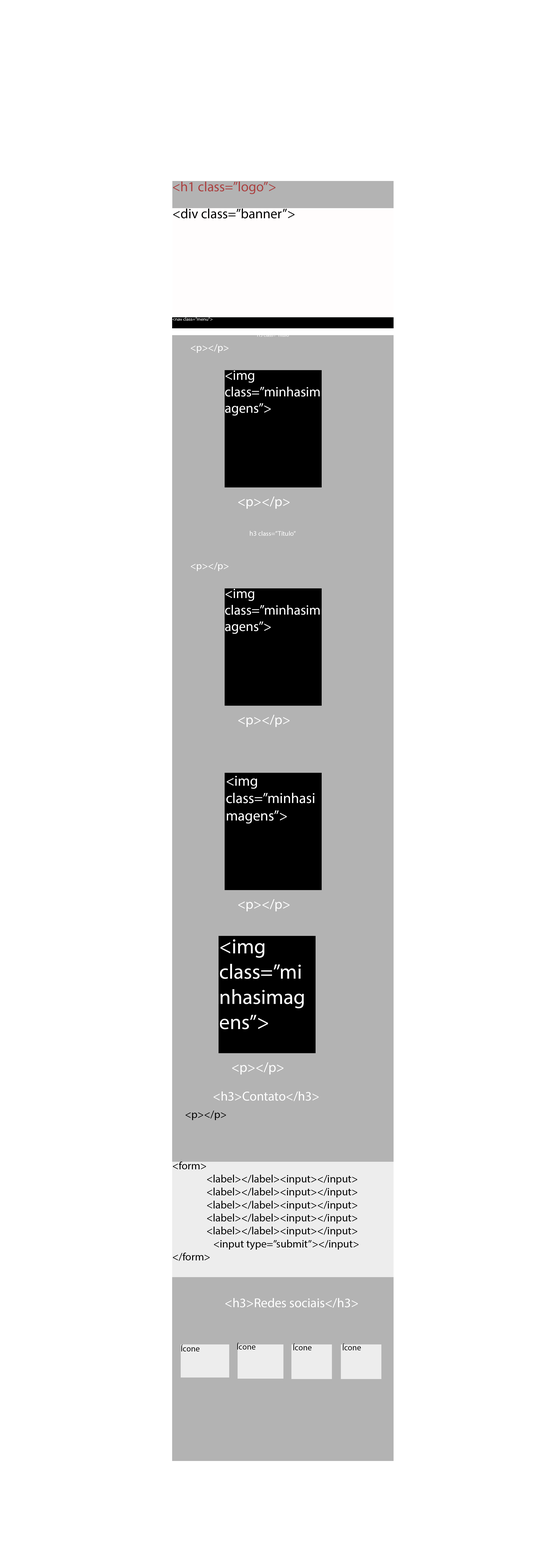
<style>
.page{position:relative;width:560px;height:1568px;background:#ffffff}
.page>*{position:absolute;margin:0}
.t1{font:13.7px "MyriadPro-Regular";color:#ab4040}
.t2{font:13.7px "MyriadPro-Regular";color:#000000}
.t3{font:4.8px "MyriadPro-Regular";color:#ffffff}
.t4{font:10.1px "MyriadPro-Regular";color:#ffffff}
.t5{font:13.7px "MyriadPro-Regular";color:#ffffff}
.t6{font:6.7px "MyriadPro-Regular";color:#ffffff}
.t7{font:0.7px "MyriadPro-Regular";color:#ffffff}
.t8{font:6.8px "MyriadPro-Regular";color:#ffffff}
.t9{font:14.5px "MyriadPro-Regular";color:#ffffff}
.t10{font:21px "MyriadPro-Regular";color:#ffffff}
.t11{font:13px "MyriadPro-Regular";color:#ffffff}
.t12{font:10.8px "MyriadPro-Regular";color:#000000}
.t13{font:8.3px "MyriadPro-Regular";color:#000000}
</style>
<div class="page">
<p class="t1" style="left:173px;top:182px;width:102px;height:12px">&lt;h1 class=”logo”&gt;</p>
<p class="t2" style="left:173px;top:209px;width:121px;height:9px">&lt;div class=”banner”&gt;</p>
<p class="t3" style="left:172px;top:317px;width:40px;height:4px">&lt;nav class=”menu”&gt;</p>
<p class="t3" style="left:257px;top:333px;width:33px;height:4px">H3 class=”Título”</p>
<p class="t4" style="left:191px;top:344px;width:37px;height:9px">&lt;p&gt;&lt;/p&gt;</p>
<p class="t5" style="left:225px;top:371px;width:95px;height:45px">&lt;img class=”minhasimagens”&gt;</p>
<p class="t5" style="left:238px;top:497px;width:51px;height:12px">&lt;p&gt;&lt;/p&gt;</p>
<p class="t6" style="left:250px;top:531px;width:46px;height:5px"><span class="t7">        </span><span class="t8">h3 </span>class=”Título”</p>
<p class="t4" style="left:191px;top:562px;width:37px;height:9px">&lt;p&gt;&lt;/p&gt;</p>
<p class="t5" style="left:225px;top:589px;width:95px;height:45px">&lt;img class=”minhasimagens”&gt;</p>
<p class="t5" style="left:238px;top:715px;width:51px;height:12px">&lt;p&gt;&lt;/p&gt;</p>
<p class="t9" style="left:226px;top:776px;width:88px;height:48px">&lt;img class=”minhasimagens”&gt;</p>
<p class="t5" style="left:238px;top:899px;width:51px;height:12px">&lt;p&gt;&lt;/p&gt;</p>
<p class="t10" style="left:220px;top:939px;width:84px;height:90px">&lt;img class=”minhasimagens”&gt;</p>
<p class="t5" style="left:232px;top:1062px;width:51px;height:12px">&lt;p&gt;&lt;/p&gt;</p>
<p class="t11" style="left:213px;top:1091px;width:105px;height:10px">&lt;h3&gt;Contato&lt;/h3&gt;</p>
<p class="t12" style="left:185px;top:1111px;width:41px;height:9px">&lt;p&gt;&lt;/p&gt;</p>
<p class="t12" style="left:173px;top:1162px;width:185px;height:99px">&lt;form&gt;<br>     &lt;label&gt;&lt;/label&gt;&lt;input&gt;&lt;/input&gt;<br>     &lt;label&gt;&lt;/label&gt;&lt;input&gt;&lt;/input&gt;<br>     &lt;label&gt;&lt;/label&gt;&lt;input&gt;&lt;/input&gt;<br>     &lt;label&gt;&lt;/label&gt;&lt;input&gt;&lt;/input&gt;<br>     &lt;label&gt;&lt;/label&gt;&lt;input&gt;&lt;/input&gt;<br>      &lt;input type=”submit”&gt;&lt;/input&gt;<br>&lt;/form&gt;</p>
<p class="t11" style="left:225px;top:1298px;width:133px;height:10px">&lt;h3&gt;Redes sociais&lt;/h3&gt;</p>
<p class="t13" style="left:181px;top:1345px;width:18px;height:6px">Ícone</p>
<p class="t13" style="left:237px;top:1343px;width:18px;height:7px">Ícone</p>
<p class="t13" style="left:293px;top:1343px;width:18px;height:7px">Ícone</p>
<p class="t13" style="left:342px;top:1343px;width:19px;height:7px">Ícone</p>
</div>
